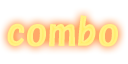
<style>
.page{position:relative;width:128px;height:64px;background:#ffffff}
.page>*{position:absolute;margin:0}
.t1{font:38px "HGPSoeiKakupoptai";letter-spacing:0.025em;color:#fff185}
</style>
<div class="page">
<p class="t1" style="left:7px;top:15px;width:111px;height:32px">combo</p>
</div>
